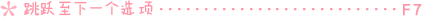
<style>
.page{position:relative;width:422px;height:17px;background:#ffffff}
.page>*{position:absolute;margin:0}
.t1{font:18px "¢è?";color:#ff93a5}
</style>
<div class="page">
<p class="t1" style="left:24px;top:0px;width:129px;height:16px">跳跃至下一个选项</p>
</div>
